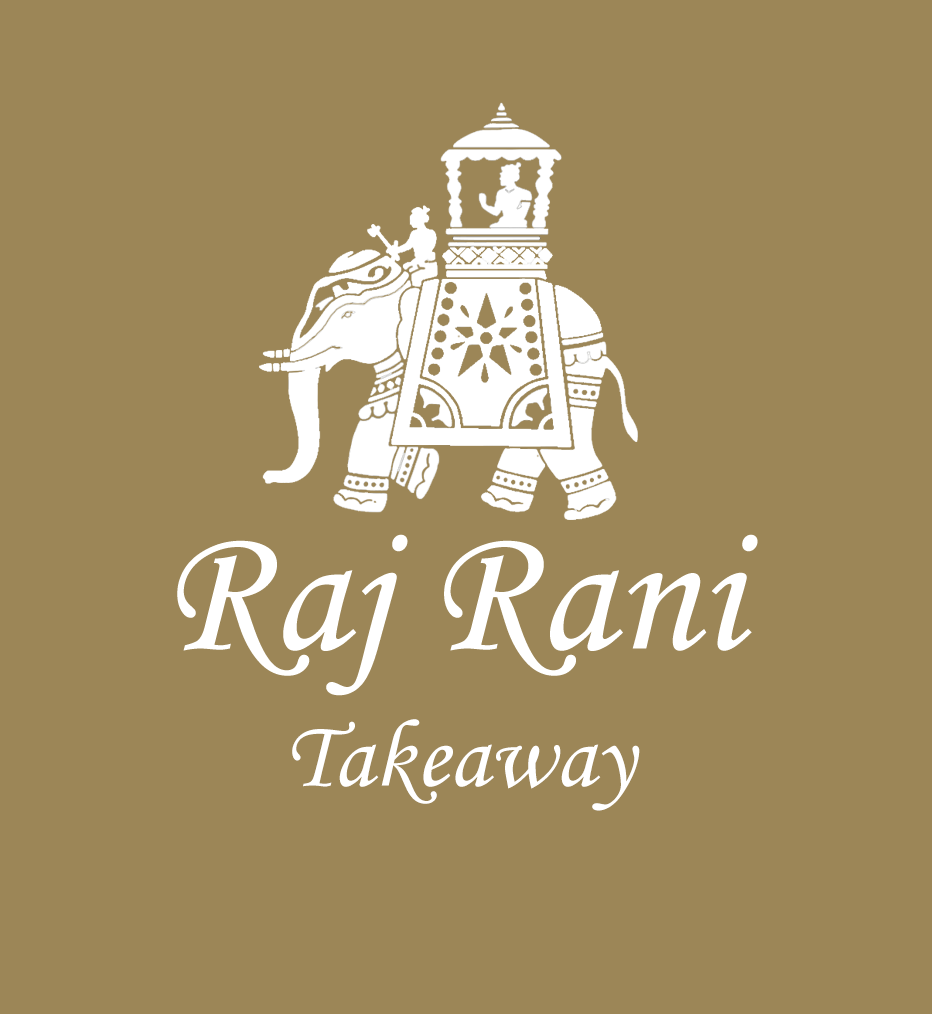
<style>
.page{position:relative;width:932px;height:1014px;background:#9c8657}
.page>*{position:absolute;margin:0}
.t1{font:182.9px "MonotypeCorsiva";color:#ffffff}
.t2{font:96.5px "MonotypeCorsiva";color:#ffffff}
</style>
<div class="page">
<p class="t1" style="left:177px;top:534px;width:581px;height:162px">Raj Rani</p>
<p class="t2" style="left:292px;top:719px;width:348px;height:92px">Takeaway</p>
</div>
